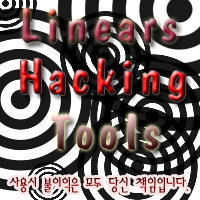
<style>
.page{position:relative;width:200px;height:200px;background:#191919}
.page>*{position:absolute;margin:0}
.t1{font:48px "HYbsrB"}
.t2{font:17px "AmiR-HM"}
</style>
<div class="page">
<p class="t1" style="left:21px;top:58px;width:165px;height:44px">Hacking</p>
<p class="t2" style="left:9px;top:177px;width:179px;height:16px">사용시 불이익은 모두 당신 책임입니다.</p>
</div>
